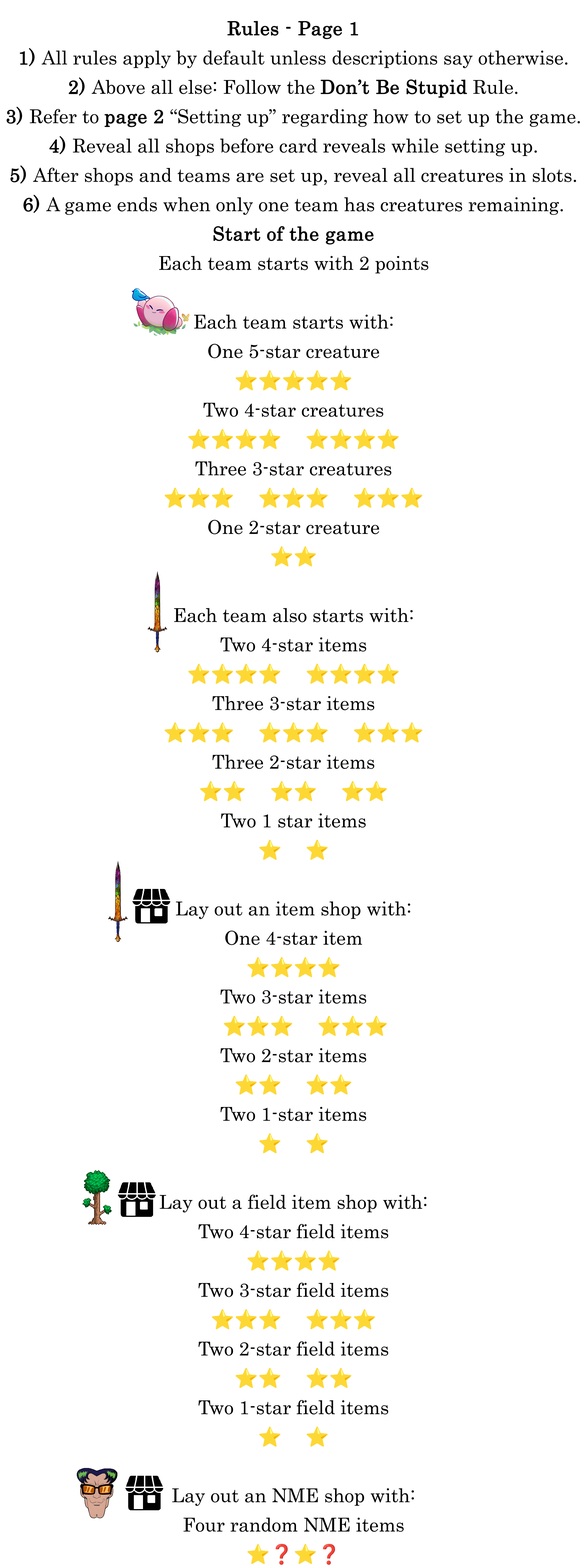
<style>
.page{position:relative;width:587px;height:1568px;background:#ffffff}
.page>*{position:absolute;margin:0}
.t1{font:32.6px/29.3px "Century"}
.t2{font:32.6px/29.3px "Century";font-weight:bold}
.t3{font:32.6px/29.3px "NotoColorEmoji-SVG"}
</style>
<div class="page">
<p class="t1" style="left:7px;top:21px;width:573px;height:1544px;text-align:center"><span class="t2">Rules - Page 1<br>1) </span>All rules apply by default unless descriptions say otherwise.<br><span class="t2">2) </span>Above all else: Follow the <span class="t2">Don’t Be Stupid</span> Rule.<br><span class="t2">3) </span>Refer to <span class="t2">page 2</span> “Setting up” regarding how to set up the game.<br><span class="t2">4) </span>Reveal all shops before card reveals while setting up.<br><span class="t2">5) </span>After shops and teams are set up, reveal all creatures in slots.<br><span class="t2">6) </span>A game ends when only one team has creatures remaining.<br><span class="t2">Start of the game<br></span>Each team starts with 2 points<br><br>Each team starts with:<br>One 5-star creature<br><span class="t3">⭐⭐⭐⭐⭐<br></span>Two 4-star creatures<br><span class="t3">⭐⭐⭐⭐ ⭐⭐⭐⭐<br></span>Three 3-star creatures <br><span class="t3">⭐⭐⭐ ⭐⭐⭐ ⭐⭐⭐<br></span>One 2-star creature<br><span class="t3">⭐⭐<br></span><br>Each team also starts with:<br>Two 4-star items<br><span class="t3">⭐⭐⭐⭐ ⭐⭐⭐⭐<br></span>Three 3-star items<br><span class="t3">⭐⭐⭐ ⭐⭐⭐ ⭐⭐⭐<br></span>Three 2-star items<br><span class="t3">⭐⭐ ⭐⭐ ⭐⭐<br></span>Two 1 star items<br><span class="t3">⭐ ⭐<br></span><br>Lay out an item shop with:<br>One 4-star item<br><span class="t3">⭐⭐⭐⭐<br></span>Two 3-star items<br><span class="t3"> ⭐⭐⭐ ⭐⭐⭐<br></span>Two 2-star items<br><span class="t3">⭐⭐ ⭐⭐<br></span>Two 1-star items<br><span class="t3">⭐ ⭐<br></span><br>Lay out a field item shop with:<br>Two 4-star field items<br><span class="t3">⭐⭐⭐⭐<br></span>Two 3-star field items<br><span class="t3">⭐⭐⭐ ⭐⭐⭐<br></span>Two 2-star field items<br><span class="t3">⭐⭐ ⭐⭐<br></span>Two 1-star field items<br><span class="t3">⭐ ⭐<br><br></span>Lay out an NME shop with:<br>Four random NME items<br><span class="t3">⭐❓⭐❓</span></p>
</div>
